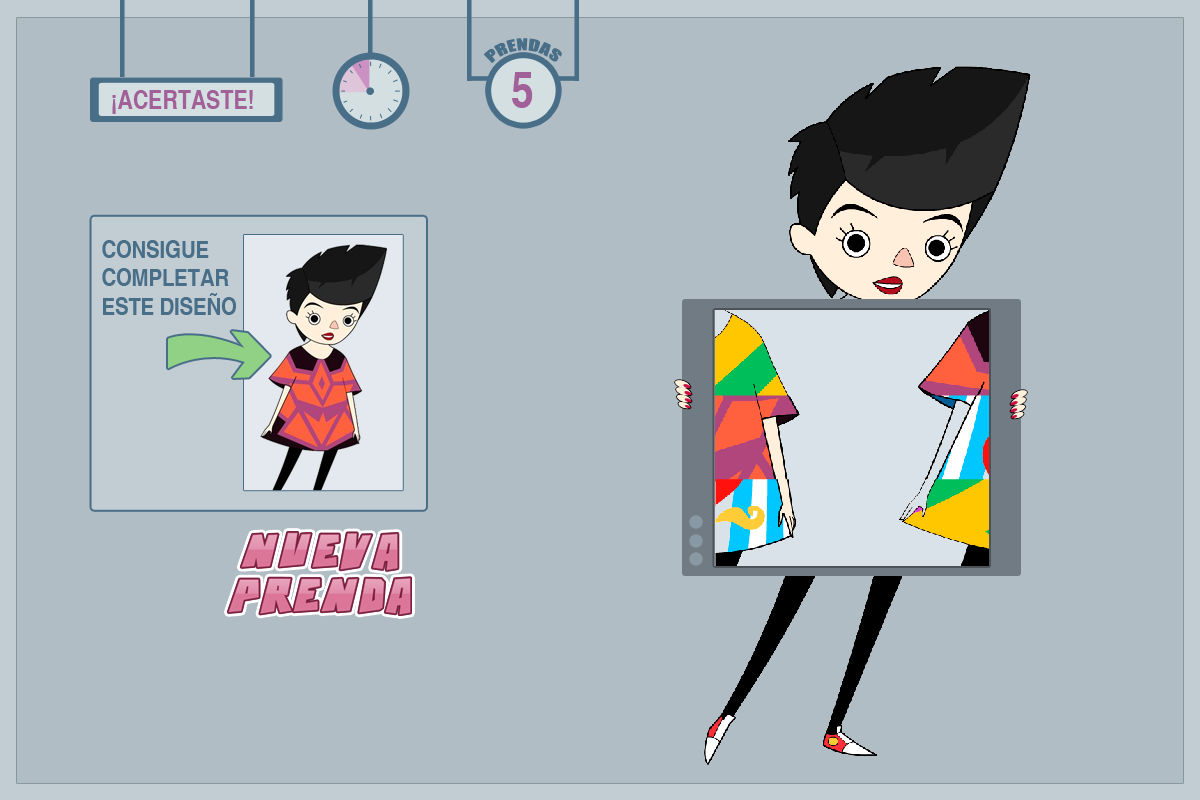
<style>
.page{position:relative;width:1200px;height:800px;background:#b1bdc5}
.page>*{position:absolute;margin:0}
.t1{font:49.7px "Helvetica-Narrow-Bold";color:#a26098;text-transform:uppercase}
.t2{font:25.6px "Helvetica-Narrow-Bold";color:#a26098;text-transform:uppercase}
.t3{font:24.1px/28.5px "Helvetica-Narrow-Bold";color:#486e88;text-transform:uppercase}
</style>
<div class="page">
<p class="t1" style="left:512px;top:72px;width:21px;height:36px">5</p>
<p class="t2" style="left:112px;top:90px;width:141px;height:24px">¡acertaste!</p>
<p class="t3" style="left:102px;top:240px;width:134px;height:75px">Consigue<br>completar<br>este diseño</p>
</div>
